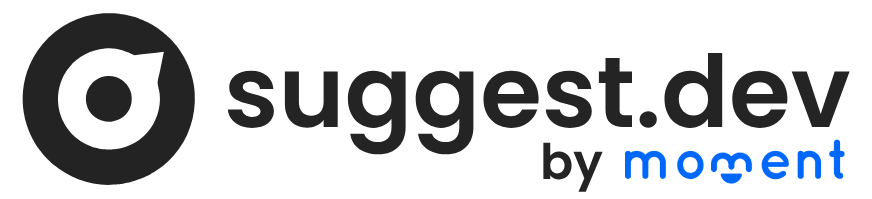
<style>
.page{position:relative;width:872px;height:199px;background:#ffffff}
.page>*{position:absolute;margin:0}
.t1{font:100px "Poppins-SemiBold";color:#242424}
.t2{font:49px "Poppins-SemiBold";color:#242424}
</style>
<div class="page">
<p class="t1" style="left:227px;top:53px;width:623px;height:102px">suggest.dev</p>
<p class="t2" style="left:543px;top:142px;width:60px;height:50px">by</p>
</div>
